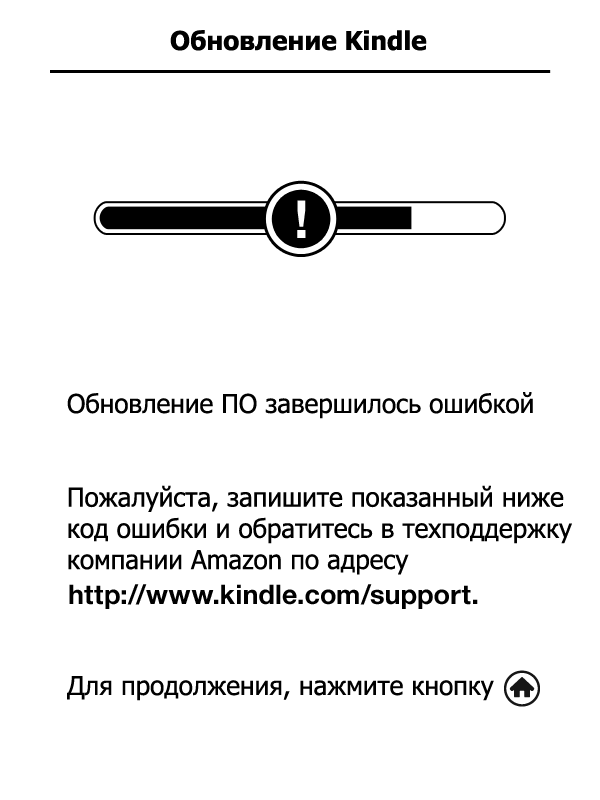
<style>
.page{position:relative;width:600px;height:800px;background:#ffffff}
.page>*{position:absolute;margin:0}
.t1{font:26px "Tahoma-Bold";color:#000000}
.t2{font:26px "Tahoma";color:#000000}
</style>
<div class="page">
<p class="t1" style="left:170px;top:30px;width:257px;height:21px">Обновление Kindle</p>
<p class="t2" style="left:67px;top:392px;width:505px;height:183px">Обновление ПО завершилось ошибкой<br><br><br>Пожалуйста, запишите показанный ниже<br>код ошибки и обратитесь в техподдержку <br>компании Amazon по адресу</p>
<p class="t2" style="left:67px;top:676px;width:427px;height:25px">Для продолжения, нажмите кнопку</p>
</div>
